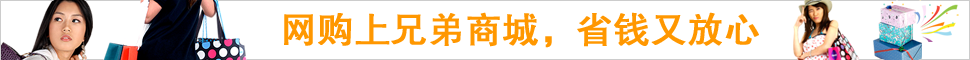
<style>
.page{position:relative;width:970px;height:60px;background:#ffffff}
.page>*{position:absolute;margin:0}
.t1{font:36px "FZHTJW--GB1-0";color:#ff9700;font-weight:bold}
</style>
<div class="page">
<p class="t1" style="left:284px;top:12px;width:475px;height:36px">网购上兄弟商城，省钱又放心</p>
</div>
